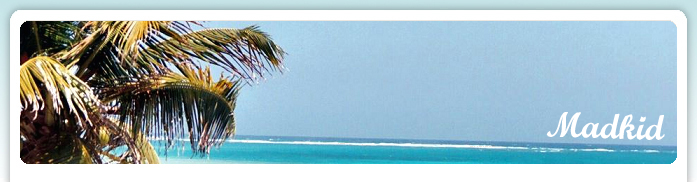
<style>
.page{position:relative;width:697px;height:182px}
.page>*{position:absolute;margin:0}
.t1{font:36px "ScriptMTBold";color:#ffffff}
</style>
<div class="page">
<p class="t1" style="left:546px;top:112px;width:119px;height:28px">Madkid</p>
</div>
